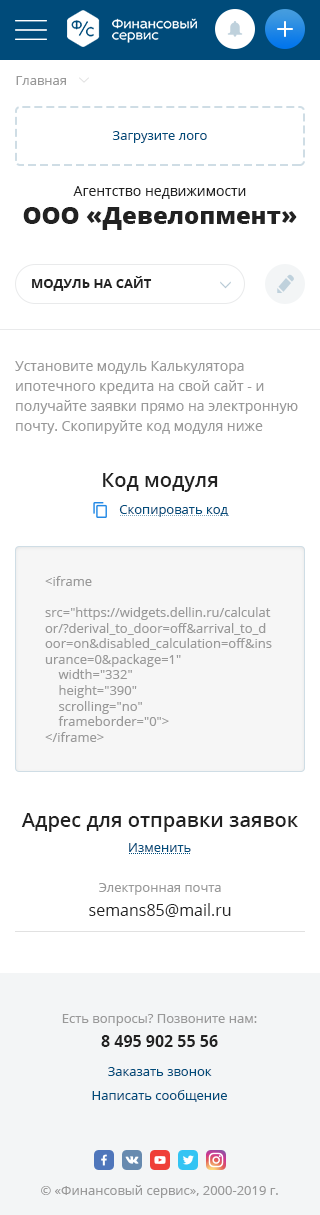
<style>
.page{position:relative;width:320px;height:1215px;background:#ffffff}
.page>*{position:absolute;margin:0}
.t1{font:13px "OpenSans";color:#999999}
.t2{font:13px "OpenSans";color:#004b7a}
.t3{font:14px "OpenSans";color:#222222}
.t4{font:24px "OpenSans-Extrabold";color:#222222}
.t5{font:13px "OpenSans-Bold";color:#222222;text-transform:uppercase}
.t6{font:14px/20px "OpenSans";color:#999999}
.t7{font:20px "OpenSans-Semibold";color:#222222}
.t8{font:16px/24px "OpenSans";color:#222222}
.t9{font:13px/24px "OpenSans";color:#999999}
.t10{font:16px/24px "OpenSans-Bold";color:#222222}
.t11{font:13px/24px "OpenSans";color:#004b7a}
</style>
<div class="page">
<p class="t1" style="left:16px;top:76px;width:50px;height:9px">Главная</p>
<p class="t2" style="left:112px;top:131px;width:95px;height:12px">Загрузите лого</p>
<p class="t3" style="left:73px;top:186px;width:173px;height:13px">Агентство недвижимости</p>
<p class="t4" style="left:23px;top:207px;width:274px;height:23px">ООО «Девелопмент»</p>
<p class="t5" style="left:32px;top:276px;width:120px;height:15px">модуль на сайт</p>
<p class="t6" style="left:15px;top:361px;width:283px;height:73px">Установите модуль Калькулятора ипотечного кредита на свой сайт - и получайте заявки прямо на электронную почту. Скопируйте код модуля ниже</p>
<p class="t7" style="left:103px;top:473px;width:115px;height:19px">Код модуля</p>
<p class="t2" style="left:119px;top:505px;width:109px;height:12px">Скопировать код</p>
<p class="t1" style="left:45px;top:576px;width:227px;height:166px">&lt;iframe<br>    src="https://widgets.dellin.ru/calculator/?derival_to_door=off&amp;arrival_to_door=on&amp;disabled_calculation=off&amp;insurance=0&amp;package=1"<br>    width="332"<br>    height="390"<br>    scrolling="no"<br>    frameborder="0"&gt;<br>&lt;/iframe&gt;</p>
<p class="t7" style="left:21px;top:813px;width:277px;height:19px">Адрес для отправки заявок</p>
<p class="t2" style="left:129px;top:843px;width:62px;height:9px">Изменить</p>
<p class="t1" style="left:89px;top:883px;width:142px;height:34px;text-align:center">Электронная почта<br><span class="t8">semans85@mail.ru</span></p>
<p class="t9" style="left:62px;top:1014px;width:195px;height:33px;text-align:center">Есть вопросы? Позвоните нам:<br><span class="t10">8 495 902 55 56</span></p>
<p class="t11" style="left:92px;top:1067px;width:135px;height:35px;text-align:center">Заказать звонок          <br>Написать сообщение</p>
<p class="t1" style="left:41px;top:1185px;width:237px;height:13px">© «Финансовый сервис», 2000-2019 г.</p>
</div>
